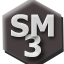
<style>
.page{position:relative;width:64px;height:64px}
.page>*{position:absolute;margin:0}
.t1{font:30px "Tahoma-Bold";color:#cfcfcf}
.t2{font:30px "Tahoma-Bold";color:#d2d2d2}
</style>
<div class="page">
<p class="t1" style="left:11px;top:14px;width:43px;height:23px">SM</p>
<p class="t2" style="left:24px;top:34px;width:17px;height:23px">3</p>
</div>
